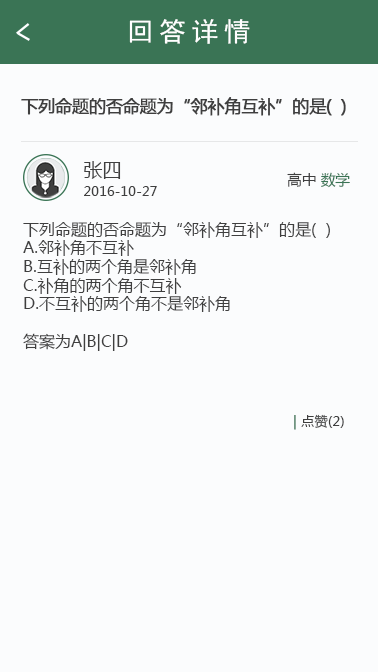
<style>
.page{position:relative;width:378px;height:672px;background:#fbfcfd}
.page>*{position:absolute;margin:0}
.t1{font:26.7px "SimHei";letter-spacing:0.2em;color:#ffffff}
.t2{font:17.3px "MicrosoftYaHei";letter-spacing:-0.05em;color:#3f3f3f;font-weight:bold}
.t3{font:13.3px/18.7px "MicrosoftYaHei";color:#3f3f3f}
.t4{font:18.7px/18.7px "MicrosoftYaHei";color:#3f3f3f}
.t5{font:14.7px "MicrosoftYaHei";color:#3f3f3f}
.t6{font:14.7px "MicrosoftYaHei";color:#3a7455}
.t7{font:12px/18.7px "MicrosoftYaHei";color:#3f3f3f}
.t8{font:13.3px "MicrosoftYaHei";color:#3f3f3f}
.t9{font:13.3px "MicrosoftYaHei";color:#3a7455;font-weight:bold}
</style>
<div class="page">
<p class="t1" style="left:129px;top:19px;width:121px;height:25px">回答详情</p>
<p class="t2" style="left:21px;top:97px;width:325px;height:19px">下列命题的否命题为“邻补角互补”的是(  )</p>
<p class="t3" style="left:84px;top:161px;width:73px;height:35px"><span class="t4">张四 <br></span>2016-10-27</p>
<p class="t5" style="left:287px;top:172px;width:63px;height:16px">高中 <span class="t6">数学</span></p>
<p class="t7" style="left:23px;top:222px;width:307px;height:129px">下列命题的否命题为“邻补角互补”的是(  )<br>A.邻补角不互补<br>B.互补的两个角是邻补角<br>C.补角的两个角不互补<br>D.不互补的两个角不是邻补角<br><br>答案为A|B|C|D</p>
<p class="t8" style="left:294px;top:414px;width:50px;height:16px"><span class="t9">| </span>点赞(2)</p>
</div>
